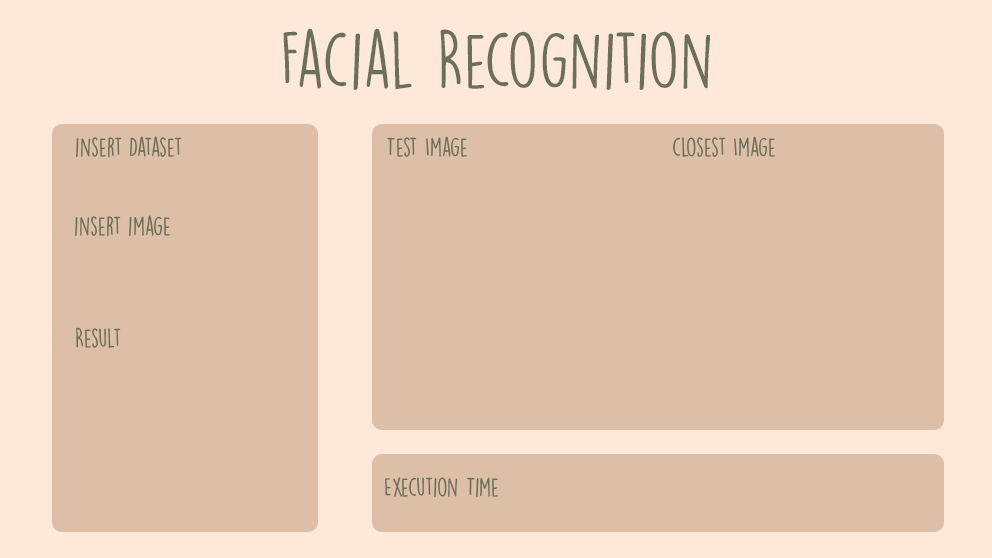
<style>
.page{position:relative;width:992px;height:558px;background:#ddbfa8}
.page>*{position:absolute;margin:0}
.t1{font:72px "DKLemonYellowSun";color:#6b705a}
.t2{font:24px "DKLemonYellowSun";color:#6b705a}
</style>
<div class="page">
<p class="t1" style="left:283px;top:28px;width:427px;height:62px">Facial Recognition</p>
<p class="t2" style="left:76px;top:136px;width:106px;height:22px">insert Dataset</p>
<p class="t2" style="left:387px;top:136px;width:80px;height:21px">Test Image</p>
<p class="t2" style="left:673px;top:136px;width:102px;height:21px">closest Image</p>
<p class="t2" style="left:75px;top:215px;width:95px;height:22px">insert image</p>
<p class="t2" style="left:76px;top:327px;width:45px;height:21px">Result</p>
<p class="t2" style="left:385px;top:477px;width:113px;height:21px">Execution Time</p>
</div>
